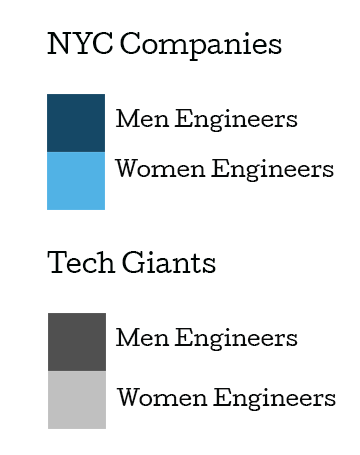
<style>
.page{position:relative;width:360px;height:455px;background:#ffffff}
.page>*{position:absolute;margin:0}
.t1{font:25px "Cutive-Regular";color:#000605}
.t2{font:21px "Cutive-Regular";color:#080a0a}
.t3{font:29px "Georgia";color:#a4f6ed}
</style>
<div class="page">
<p class="t1" style="left:47px;top:32px;width:235px;height:29px">NYC Companies</p>
<p class="t2" style="left:115px;top:109px;width:183px;height:23px"><span class="t3"><br></span>Men Engineers</p>
<p class="t2" style="left:114px;top:159px;width:220px;height:23px"><span class="t3"><br></span>Women Engineers</p>
<p class="t1" style="left:47px;top:251px;width:169px;height:22px">Tech Giants</p>
<p class="t2" style="left:115px;top:328px;width:183px;height:23px"><span class="t3"><br></span>Men Engineers</p>
<p class="t2" style="left:116px;top:388px;width:220px;height:23px"><span class="t3"><br></span>Women Engineers</p>
</div>
